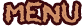
<style>
.page{position:relative;width:84px;height:28px;background:#3b080d}
.page>*{position:absolute;margin:0}
.t1{font:26px "TOBACCO";color:#c4845a;font-weight:bold}
</style>
<div class="page">
<p class="t1" style="left:5px;top:1px;width:74px;height:22px">MENU</p>
</div>
